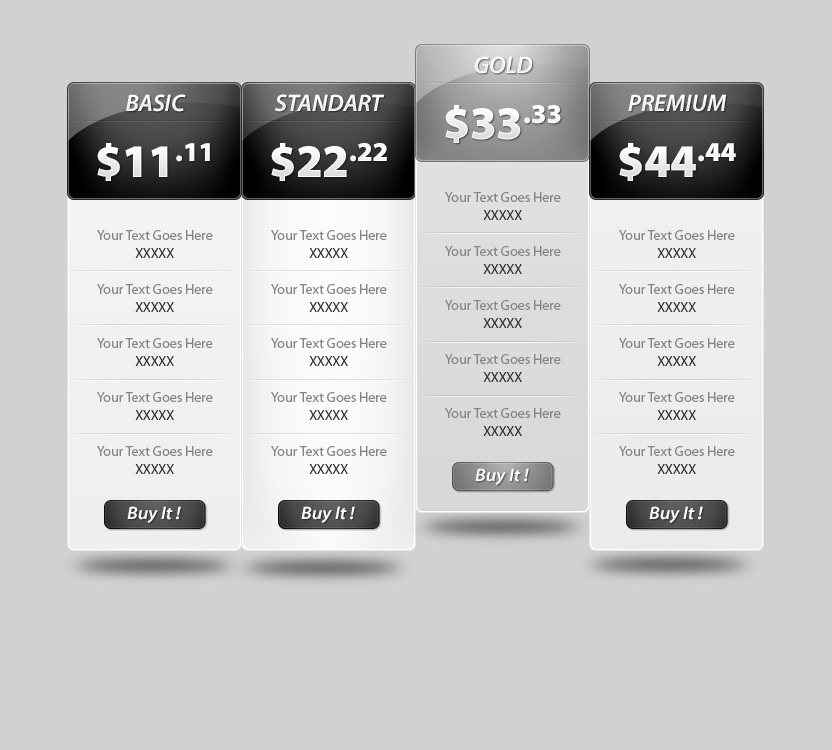
<style>
.page{position:relative;width:832px;height:750px;background:#d1d1d1}
.page>*{position:absolute;margin:0}
.t1{font:24px "MyriadPro-SemiboldIt";color:#ffffff;text-transform:uppercase}
.t2{font:46.8px "MyriadPro-Black";color:#ffffff}
.t3{font:14px/18px "MyriadPro-Regular";color:#858584}
.t4{font:14px/18px "MyriadPro-Regular";color:#313131}
.t5{font:18px "MyriadPro-SemiboldSemiExtIt";color:#ffffff}
</style>
<div class="page">
<p class="t1" style="left:474px;top:56px;width:59px;height:18px">GOLD</p>
<p class="t1" style="left:126px;top:94px;width:60px;height:18px">Basic</p>
<p class="t1" style="left:275px;top:94px;width:110px;height:18px">Standart</p>
<p class="t1" style="left:628px;top:94px;width:98px;height:18px">PREMIUM</p>
<p class="t2" style="left:445px;top:105px;width:116px;height:38px">$33.33</p>
<p class="t2" style="left:97px;top:143px;width:113px;height:38px">$11.11</p>
<p class="t2" style="left:271px;top:143px;width:116px;height:38px">$22.22</p>
<p class="t2" style="left:619px;top:143px;width:117px;height:38px">$44.44</p>
<p class="t3" style="left:445px;top:192px;width:116px;height:244px;text-align:center">Your Text Goes Here<br><span class="t4">XXXXX<br><br></span>Your Text Goes Here<br><span class="t4">XXXXX<br><br></span>Your Text Goes Here<br><span class="t4">XXXXX<br><br></span>Your Text Goes Here<br><span class="t4">XXXXX<br><br></span>Your Text Goes Here<br><span class="t4">XXXXX</span></p>
<p class="t3" style="left:97px;top:230px;width:116px;height:244px;text-align:center">Your Text Goes Here<br><span class="t4">XXXXX<br><br></span>Your Text Goes Here<br><span class="t4">XXXXX<br><br></span>Your Text Goes Here<br><span class="t4">XXXXX<br><br></span>Your Text Goes Here<br><span class="t4">XXXXX<br><br></span>Your Text Goes Here<br><span class="t4">XXXXX</span></p>
<p class="t3" style="left:271px;top:230px;width:116px;height:244px;text-align:center">Your Text Goes Here<br><span class="t4">XXXXX<br><br></span>Your Text Goes Here<br><span class="t4">XXXXX<br><br></span>Your Text Goes Here<br><span class="t4">XXXXX<br><br></span>Your Text Goes Here<br><span class="t4">XXXXX<br><br></span>Your Text Goes Here<br><span class="t4">XXXXX</span></p>
<p class="t3" style="left:619px;top:230px;width:116px;height:244px;text-align:center">Your Text Goes Here<br><span class="t4">XXXXX<br><br></span>Your Text Goes Here<br><span class="t4">XXXXX<br><br></span>Your Text Goes Here<br><span class="t4">XXXXX<br><br></span>Your Text Goes Here<br><span class="t4">XXXXX<br><br></span>Your Text Goes Here<br><span class="t4">XXXXX</span></p>
<p class="t5" style="left:475px;top:468px;width:54px;height:17px">Buy It !</p>
<p class="t5" style="left:127px;top:506px;width:54px;height:17px">Buy It !</p>
<p class="t5" style="left:301px;top:506px;width:54px;height:17px">Buy It !</p>
<p class="t5" style="left:649px;top:506px;width:54px;height:17px">Buy It !</p>
</div>
